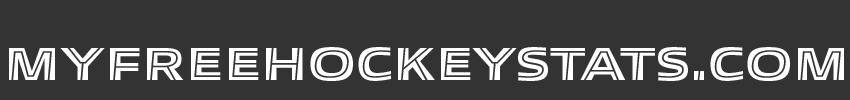
<style>
.page{position:relative;width:850px;height:100px;background:#333333}
.page>*{position:absolute;margin:0}
.t1{font:46px "AllumiStdExtendedInline-Black24A";color:#fbf8f8}
</style>
<div class="page">
<p class="t1" style="left:9px;top:47px;width:835px;height:34px">MyFreeHockeystats.com</p>
</div>
